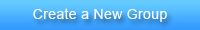
<style>
.page{position:relative;width:200px;height:30px}
.page>*{position:absolute;margin:0}
.t1{font:14px "ArialMT";letter-spacing:0.025em;color:#ffffff}
</style>
<div class="page">
<p class="t1" style="left:33px;top:8px;width:134px;height:14px">Create a New Group</p>
</div>
